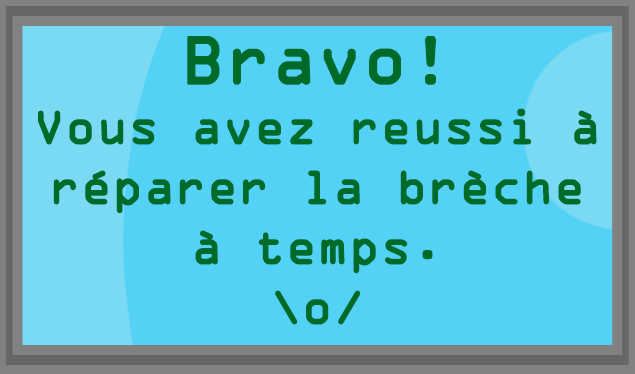
<style>
.page{position:relative;width:635px;height:374px;background:#53d2f5}
.page>*{position:absolute;margin:0}
.t1{font:50px "OCRAExtended";color:#006a28;font-weight:bold}
.t2{font:72px "OCRAExtended";color:#006a28;font-weight:bold}
</style>
<div class="page">
<p class="t1" style="left:38px;top:36px;width:559px;height:289px;text-align:center"><span class="t2">Bravo!</span><br>Vous avez reussi à <br>réparer la brèche <br>à temps.<br>\o/</p>
</div>
